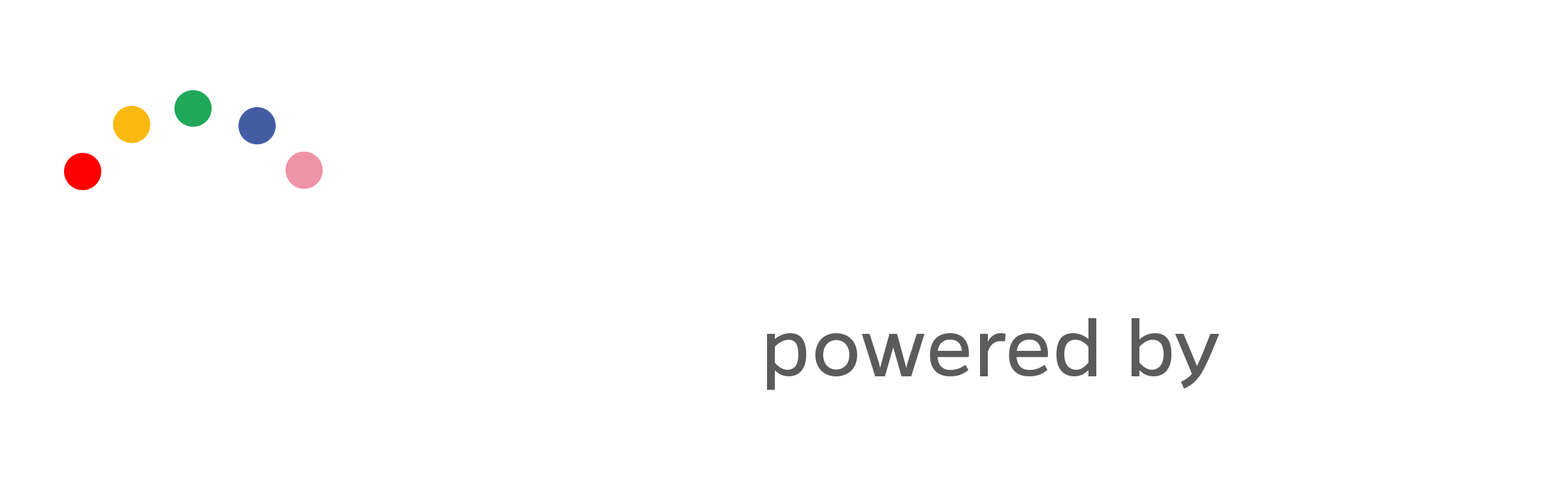
<style>
.page{position:relative;width:1568px;height:490px;background:#ffffff}
.page>*{position:absolute;margin:0}
.t1{font:88.2px "Gentona-Book";letter-spacing:0.02em;color:#5b5b5b}
.t2{font:88.2px "Gentona-Book";letter-spacing:0.02em;color:#ffffff}
</style>
<div class="page">
<p class="t1" style="left:767px;top:318px;width:718px;height:72px">powered by<span class="t2"> Cereal</span></p>
</div>
